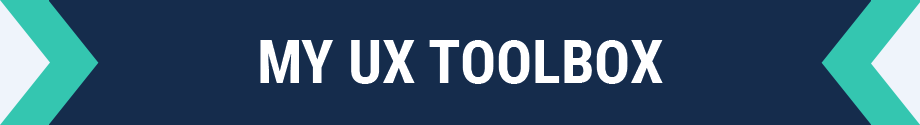
<style>
.page{position:relative;width:920px;height:125px;background:#152c4c}
.page>*{position:absolute;margin:0}
.t1{font:60px "RobotoCondensed-Bold";color:#ffffff}
</style>
<div class="page">
<p class="t1" style="left:260px;top:40px;width:403px;height:44px">MY UX TOOLBOX</p>
</div>
